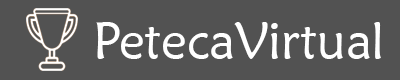
<style>
.page{position:relative;width:400px;height:80px;background:#525252}
.page>*{position:absolute;margin:0}
.t1{font:52px "MaiandraGD-Regular";color:#ffffff}
</style>
<div class="page">
<p class="t1" style="left:96px;top:22px;width:285px;height:37px">PetecaVirtual</p>
</div>
